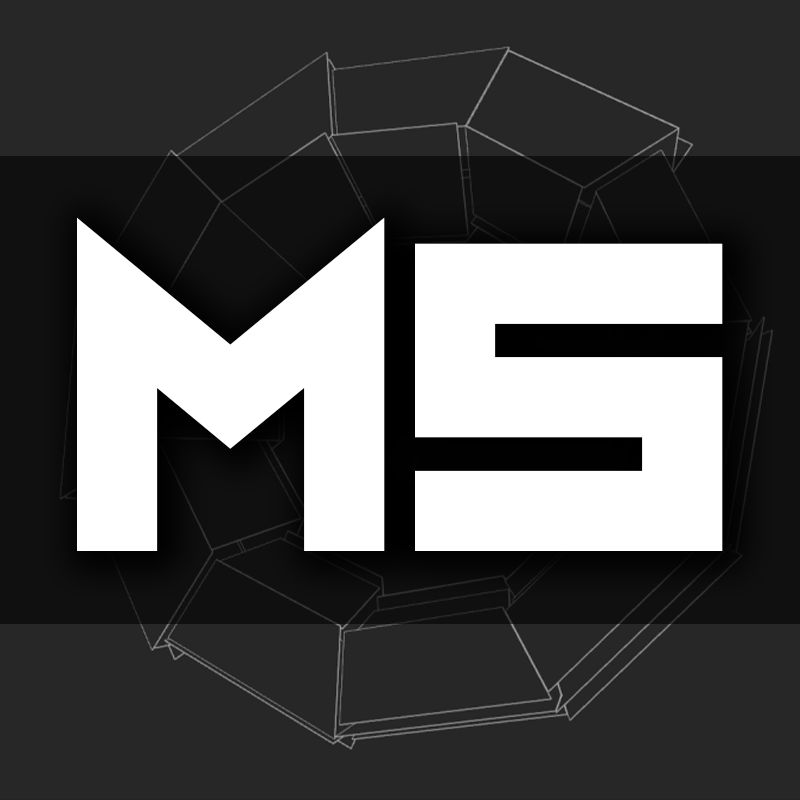
<style>
.page{position:relative;width:800px;height:800px;background:#272727}
.page>*{position:absolute;margin:0}
.t1{font:519.7px "ZipSonik";color:#ffffff}
</style>
<div class="page">
<p class="t1" style="left:77px;top:217px;width:646px;height:334px">ms</p>
</div>
